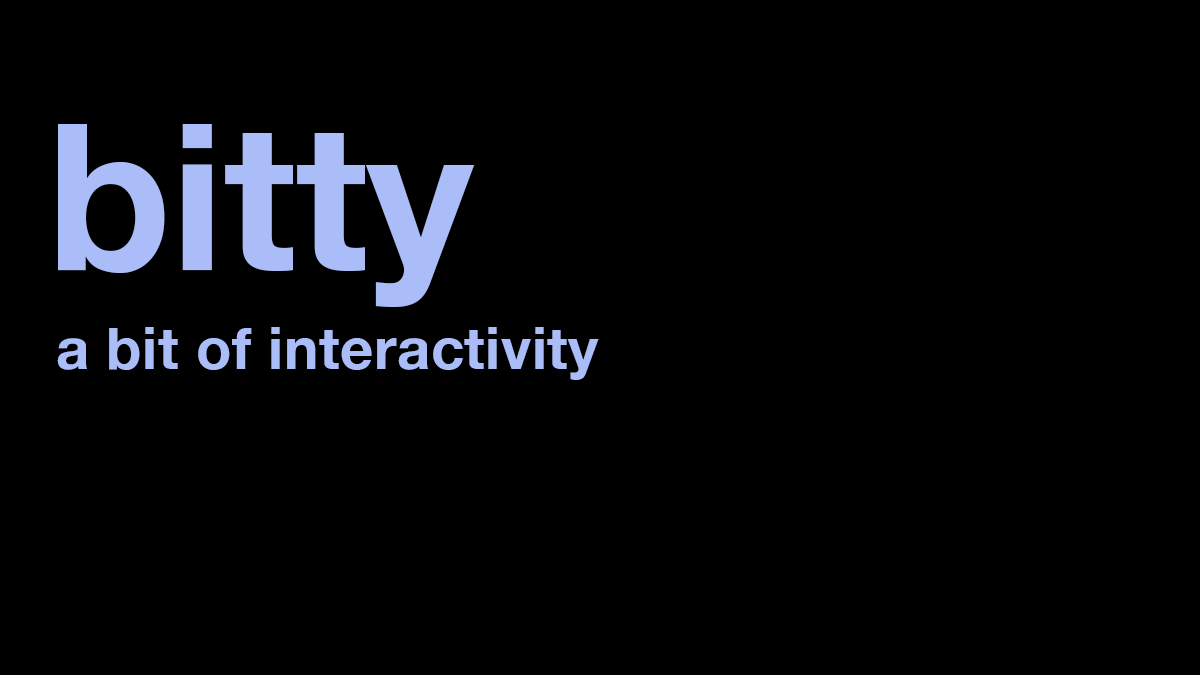
<style>
.page{position:relative;width:1200px;height:675px;background:#000000}
.page>*{position:absolute;margin:0}
.t1{font:204px "HelveticaNeue-Bold";color:#abbdf8}
.t2{font:58px "HelveticaNeue-Bold";letter-spacing:0.01em;color:#abbdf8}
</style>
<div class="page">
<p class="t1" style="left:58px;top:124px;width:417px;height:183px">bitty</p>
<p class="t2" style="left:57px;top:327px;width:542px;height:53px">a bit of interactivity</p>
</div>
